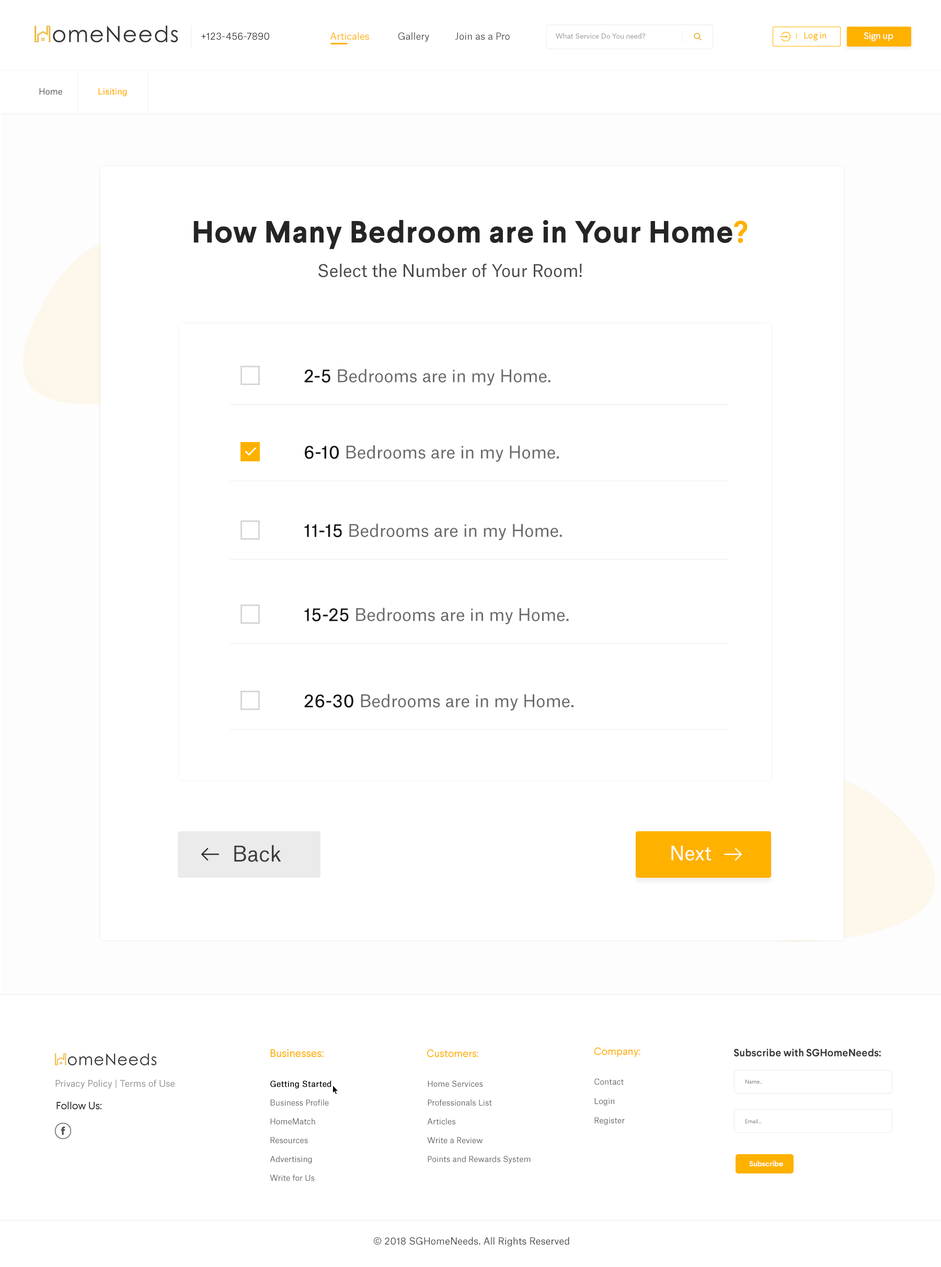
<style>
.page{position:relative;width:941px;height:1267px;background:#ffffff}
.page>*{position:absolute;margin:0}
.t1{font:9.4px "AtlasGrotesk-Regular";color:#3a3a3a}
.t2{font:9.4px "AtlasGrotesk-Regular";color:#505050}
.t3{font:9.4px "AtlasGrotesk-Regular";color:#ffb100}
.t4{font:6.8px "AtlasGrotesk-Regular";color:#a8a8a8}
.t5{font:8.9px "Larsseit";color:#ffb100}
.t6{font:9.4px "Larsseit";color:#ffffff}
.t7{font:8.4px "AtlasGrotesk-Regular";color:#737373}
.t8{font:8.4px "AtlasGrotesk-Regular";color:#ffb100}
.t9{font:30.3px "Larsseit-Bold";color:#252525;font-weight:bold}
.t10{font:30.3px "Larsseit-Bold";color:#ffb100;font-weight:bold}
.t11{font:16.7px "AtlasGrotesk-Regular";color:#494949}
.t12{font:16.7px "AtlasGrotesk-Regular";color:#696969}
.t13{font:16.7px "AtlasGrotesk-Regular";color:#111111;font-weight:bold}
.t14{font:20.9px "AtlasGrotesk-Regular";color:#3b3b3b}
.t15{font:19px "AtlasGrotesk-Regular";color:#fdfdfd}
.t16{font:11px "Larsseit";color:#ffb100}
.t17{font:10.5px "Larsseit";color:#ffb100}
.t18{font:10.5px "Larsseit-Bold";color:#383838}
.t19{font:8.9px "AtlasGrotesk-Regular";color:#919191}
.t20{font:7.8px/18.8px "AtlasGrotesk-Regular";color:#5f5f5f}
.t21{font:7.8px/18.8px "AtlasGrotesk-Regular";color:#000000;font-weight:bold}
.t22{font:7.8px/19.3px "AtlasGrotesk-Regular";color:#5f5f5f}
.t23{font:5.7px "Larsseit";color:#848484}
.t24{font:10.5px "Larsseit";color:#1f1f1f}
.t25{font:7.3px "Larsseit";color:#ffffff;font-weight:bold}
.t26{font:9.4px "AtlasGrotesk-Regular";color:#454545}
</style>
<div class="page">
<p class="t1" style="left:201px;top:32px;width:68px;height:8px">+123-456-7890</p>
<p class="t2" style="left:330px;top:32px;width:180px;height:10px"><span class="t3">Articales</span>           Gallery          Join as a Pro</p>
<p class="t4" style="left:556px;top:33px;width:89px;height:6px">What Service Do You need?</p>
<p class="t5" style="left:804px;top:32px;width:22px;height:9px">Log in</p>
<p class="t6" style="left:864px;top:32px;width:29px;height:9px">Sign up</p>
<p class="t7" style="left:39px;top:88px;width:23px;height:7px">Home</p>
<p class="t8" style="left:98px;top:88px;width:29px;height:9px">Lisiting</p>
<p class="t9" style="left:193px;top:220px;width:554px;height:29px">How Many Bedroom are in Your Home<span class="t10">?</span></p>
<p class="t11" style="left:318px;top:263px;width:264px;height:15px">Select the Number of Your Room!</p>
<p class="t12" style="left:304px;top:369px;width:246px;height:17px"><span class="t13">2-5</span> Bedrooms are in my Home.</p>
<p class="t12" style="left:305px;top:445px;width:254px;height:17px"><span class="t13">6-10</span> Bedrooms are in my Home.</p>
<p class="t12" style="left:304px;top:524px;width:258px;height:16px"><span class="t13">11-15</span> Bedrooms are in my Home.</p>
<p class="t12" style="left:304px;top:608px;width:265px;height:17px"><span class="t13">15-25</span> Bedrooms are in my Home.</p>
<p class="t12" style="left:304px;top:694px;width:269px;height:17px"><span class="t13">26-30</span> Bedrooms are in my Home.</p>
<p class="t14" style="left:234px;top:845px;width:47px;height:17px">Back</p>
<p class="t15" style="left:671px;top:846px;width:40px;height:15px">Next</p>
<p class="t16" style="left:270px;top:1050px;width:54px;height:8px">Businesses:</p>
<p class="t17" style="left:426px;top:1050px;width:52px;height:8px">Customers:</p>
<p class="t17" style="left:594px;top:1047px;width:46px;height:11px">Company:</p>
<p class="t18" style="left:734px;top:1049px;width:147px;height:8px">Subscribe with SGHomeNeeds:</p>
<p class="t19" style="left:55px;top:1080px;width:120px;height:9px">Privacy Policy | Terms of Use</p>
<p class="t20" style="left:270px;top:1081px;width:61px;height:101px"><span class="t21">Getting Started<br></span>Business Profile<br>HomeMatch<br>Resources<br>Advertising<br>Write for Us</p>
<p class="t20" style="left:427px;top:1081px;width:104px;height:83px">Home Services<br>Professionals List<br>Articles<br>Write a Review<br>Points and Rewards System</p>
<p class="t22" style="left:594px;top:1079px;width:31px;height:46px">Contact<br>Login<br>Register</p>
<p class="t23" style="left:745px;top:1080px;width:17px;height:4px">Name..</p>
<p class="t24" style="left:56px;top:1102px;width:46px;height:8px">Follow Us:</p>
<p class="t23" style="left:745px;top:1120px;width:17px;height:4px">Email...</p>
<p class="t25" style="left:749px;top:1161px;width:34px;height:6px">Subscribe</p>
<p class="t26" style="left:374px;top:1237px;width:195px;height:10px">© 2018 SGHomeNeeds. All Rights Reserved</p>
</div>
